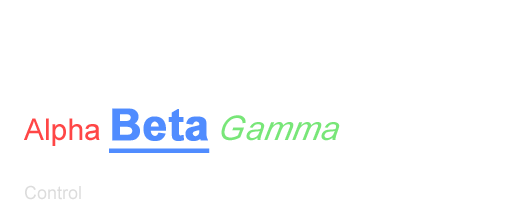
<style>
.page{position:relative;width:520px;height:220px;background:#ffffff}
.page>*{position:absolute;margin:0}
.t1{font:30px "ArialMT";color:#ff4646}
.t2{font:44px "Arial-BoldMT";color:#508cff;font-weight:bold;text-decoration:underline}
.t3{font:34px "Arial-ItalicMT";color:#78e678;font-style:italic}
.t4{font:18px "ArialMT";color:#dcdcdc}
</style>
<div class="page">
<p class="t1" style="left:24px;top:108px;width:316px;height:45px">Alpha <span class="t2">Beta </span><span class="t3">Gamma</span></p>
<p class="t4" style="left:25px;top:185px;width:56px;height:15px">Control</p>
</div>
